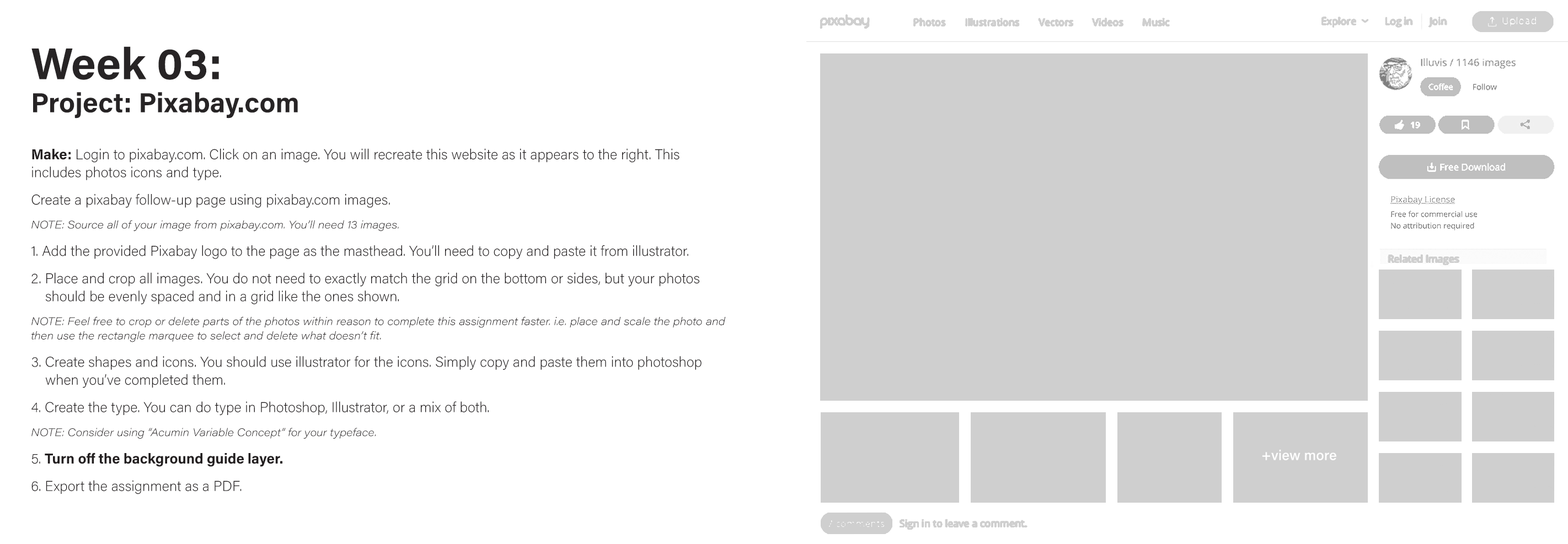
<style>
.page{position:relative;width:1568px;height:544px;background:#ffffff}
.page>*{position:absolute;margin:0}
.t1{font:27.6px "AcuminConcept-Bold";color:#272425}
.t2{font:44.5px "AcuminConcept-Bold";color:#272425}
.t3{font:14.3px "MyriadPro-Regular";color:#000000}
.t4{font:14.3px "AcuminConcept-Bold";color:#231f20}
.t5{font:14.3px "AcuminConcept-Bold";color:#000000}
</style>
<div class="page">
<p class="t1" style="left:31px;top:46px;width:267px;height:73px"><span class="t2">Week 03:<br></span>Project: Pixabay.com</p>
<p class="t3" style="left:31px;top:148px;width:695px;height:347px"><span class="t4">Make:</span> Login to pixabay.com. Click on an image. You will recreate this website as it appears to the right. This includes photos icons and type.<br>Create a pixabay follow-up page using pixabay.com images.<br>NOTE: Source all of your image from pixabay.com. You’ll need 13 images.<br>1. Add the provided Pixabay logo to the page as the masthead. You’ll need to copy and paste it from illustrator.<br>2. Place and crop all images. You do not need to exactly match the grid on the bottom or sides, but your photos should be evenly spaced and in a grid like the ones shown.<br>NOTE: Feel free to crop or delete parts of the photos within reason to complete this assignment faster. i.e. place and scale the photo and then use the rectangle marquee to select and delete what doesn’t fit.<br>3. Create shapes and icons. You should use illustrator for the icons. Simply copy and paste them into photoshop when you’ve completed them. <br>4. Create the type. You can do type in Photoshop, Illustrator, or a mix of both.<br>NOTE: Consider using “Acumin Variable Concept” for your typeface.<br>5. <span class="t5">Turn off the background guide layer.<br></span>6. Export the assignment as a PDF.</p>
</div>
